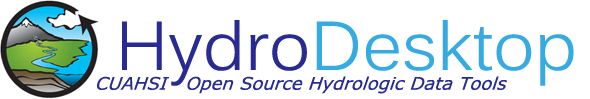
<style>
.page{position:relative;width:590px;height:99px;background:#ffffff}
.page>*{position:absolute;margin:0}
.t1{font:68px "Kalinga";color:#36abe2}
.t2{font:68px "Kalinga";color:#282b91}
.t3{font:17.5px "Verdana-Italic";color:#282b91;scale:1.03 1}
</style>
<div class="page">
<p class="t1" style="left:122px;top:20px;width:452px;height:66px"><span class="t2">Hydro</span>Desktop</p>
<p class="t3" style="left:97px;top:76px;width:410px;height:18px">CUAHSI   Open Source Hydrologic Data Tools</p>
</div>
